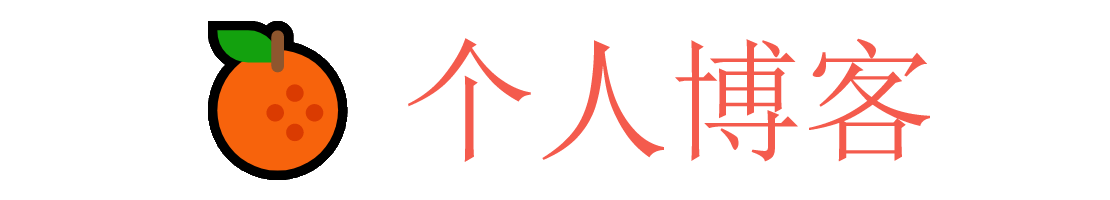
<style>
.page{position:relative;width:1110px;height:200px;background:#ffffff}
.page>*{position:absolute;margin:0}
.t1{font:133.3px "SimSun";color:#f45b4d}
</style>
<div class="page">
<p class="t1" style="left:408px;top:38px;width:522px;height:124px">个人博客</p>
</div>
